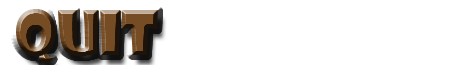
<style>
.page{position:relative;width:450px;height:65px;background:#ffffff}
.page>*{position:absolute;margin:0}
.t1{font:60px "ShowcardGothic-Reg"}
</style>
<div class="page">
<p class="t1" style="left:16px;top:9px;width:142px;height:55px">Quit</p>
</div>
